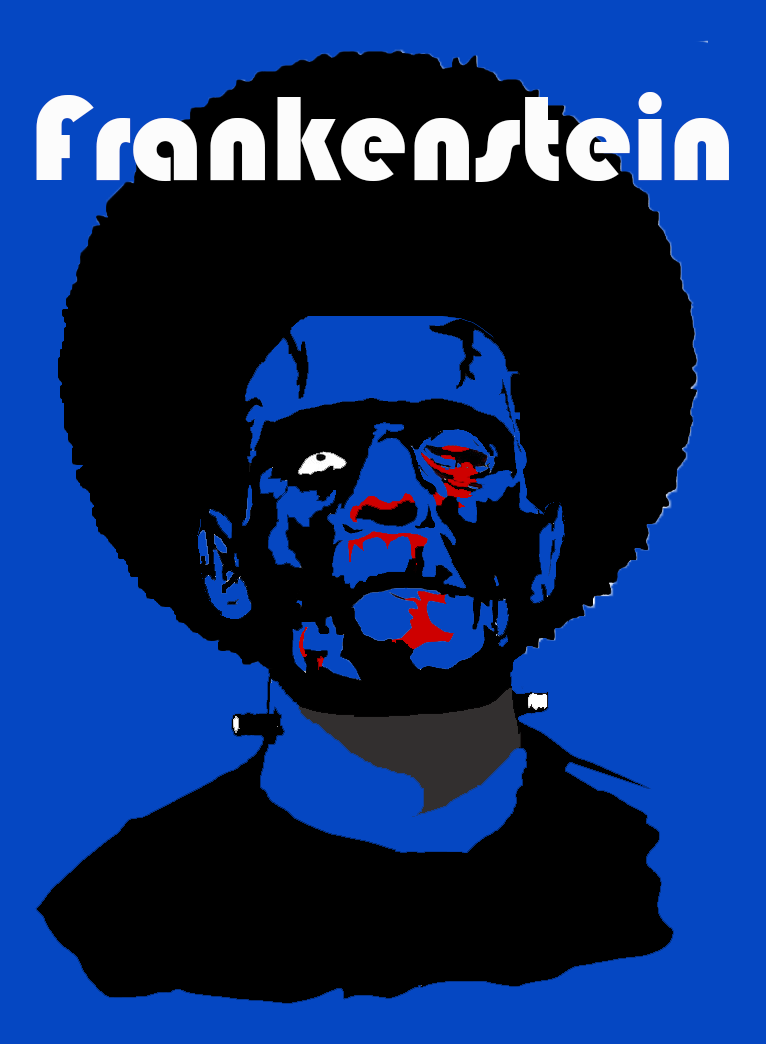
<style>
.page{position:relative;width:766px;height:1044px;background:#0547c2}
.page>*{position:absolute;margin:0}
.t1{font:125px "Bauhaus93";color:#fcfcfc}
</style>
<div class="page">
<p class="t1" style="left:36px;top:92px;width:693px;height:90px">Frankenstein</p>
</div>
